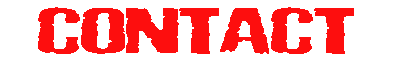
<style>
.page{position:relative;width:400px;height:70px;background:#ffffff}
.page>*{position:absolute;margin:0}
.t1{font:50px "VulgarDisplayOfPower";color:#fd0e0e}
</style>
<div class="page">
<p class="t1" style="left:38px;top:7px;width:316px;height:47px">CONTACT</p>
</div>
